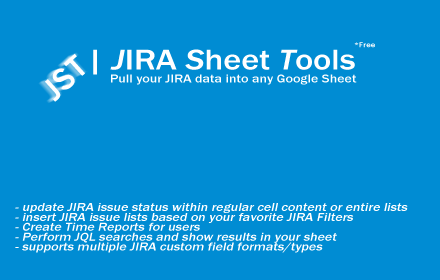
<style>
.page{position:relative;width:440px;height:280px;background:#008cd3}
.page>*{position:absolute;margin:0}
.t1{font:32.3px "FranklinGothic-MediumItalic";letter-spacing:0.04em;color:#ffffff}
.t2{font:29.6px "FranklinGothic-Medium";color:#ffffff;scale:1.16 1}
.t3{font:29.6px "FranklinGothic-MediumItalic";color:#ffffff;scale:1.16 1}
.t4{font:7.4px "FranklinGothic-Medium";color:#ffffff;scale:1.16 1}
.t5{font:12px "FranklinGothic-Medium";color:#ffffff;scale:1.16 1}
.t6{font:12px/9.9px "FranklinGothic-Medium";color:#ffffff;font-style:italic;scale:1.16 1}
</style>
<div class="page">
<p class="t1" style="left:45px;top:53px;width:40px;height:49px;rotate:-43deg">JST</p>
<p class="t2" style="left:93px;top:49px;width:262px;height:26px"><span class="t3">| J</span>IRA <span class="t3">S</span>heet <span class="t3">T</span>ools</p>
<p class="t4" style="left:354px;top:42px;width:21px;height:6px">*Free</p>
<p class="t5" style="left:111px;top:74px;width:246px;height:11px">Pull your JIRA data into any Google Sheet</p>
<p class="t6" style="left:15px;top:203px;width:393px;height:50px">- update JIRA issue status within regular cell content or entire lists<br>- insert JIRA issue lists based on your favorite JIRA Filters<br>- Create Time Reports for users<br>- Perform JQL searches and show results in your sheet<br>- supports multiple JIRA custom field formats/types</p>
</div>
